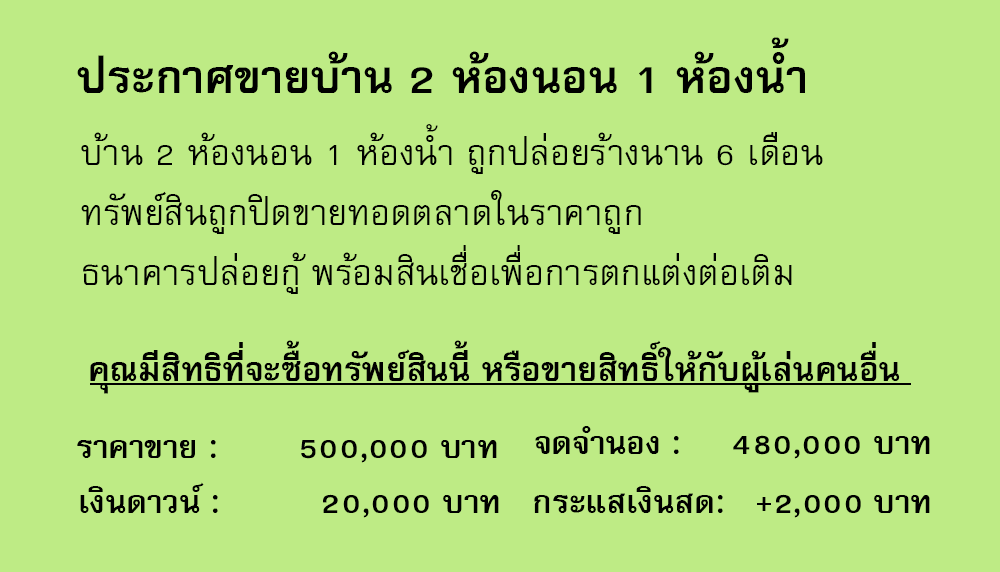
<style>
.page{position:relative;width:1000px;height:572px;background:#beeb85}
.page>*{position:absolute;margin:0}
.t1{font:64px "FreesiaUPCBold";color:#000000}
.t2{font:50px/60px "FreesiaUPC";color:#000000}
.t3{font:47px "FreesiaUPCBold";color:#000000}
.t4{font:45px "FreesiaUPCBold";color:#000000}
</style>
<div class="page">
<p class="t1" style="left:77px;top:37px;width:728px;height:56px">ประกาศขายบ้าน 2 ห้องนอน 1 ห้องน้ำ</p>
<p class="t2" style="left:81px;top:124px;width:742px;height:170px">บ้าน 2 ห้องนอน 1 ห้องน้ำ ถูกปล่อยร้างนาน 6 เดือน<br>ทรัพย์สินถูกปิดขายทอดตลาดในราคาถูก<br>ธนาคารปล่อยกู้ พร้อมสินเชื่อเพื่อการตกแต่งต่อเติม</p>
<p class="t3" style="left:90px;top:340px;width:810px;height:54px">คุณมีสิทธิที่จะซื้อทรัพย์สินนี้ หรือขายสิทธิ์ให้กับผู้เล่นคนอื่น</p>
<p class="t4" style="left:535px;top:426px;width:395px;height:33px">จดจำนอง :     480,000 บาท</p>
<p class="t4" style="left:77px;top:440px;width:420px;height:23px">ราคาขาย :        500,000 บาท</p>
<p class="t4" style="left:80px;top:482px;width:419px;height:36px">เงินดาวน์ :          20,000 บาท</p>
<p class="t4" style="left:534px;top:486px;width:396px;height:32px">กระแสเงินสด:   +2,000 บาท</p>
</div>
